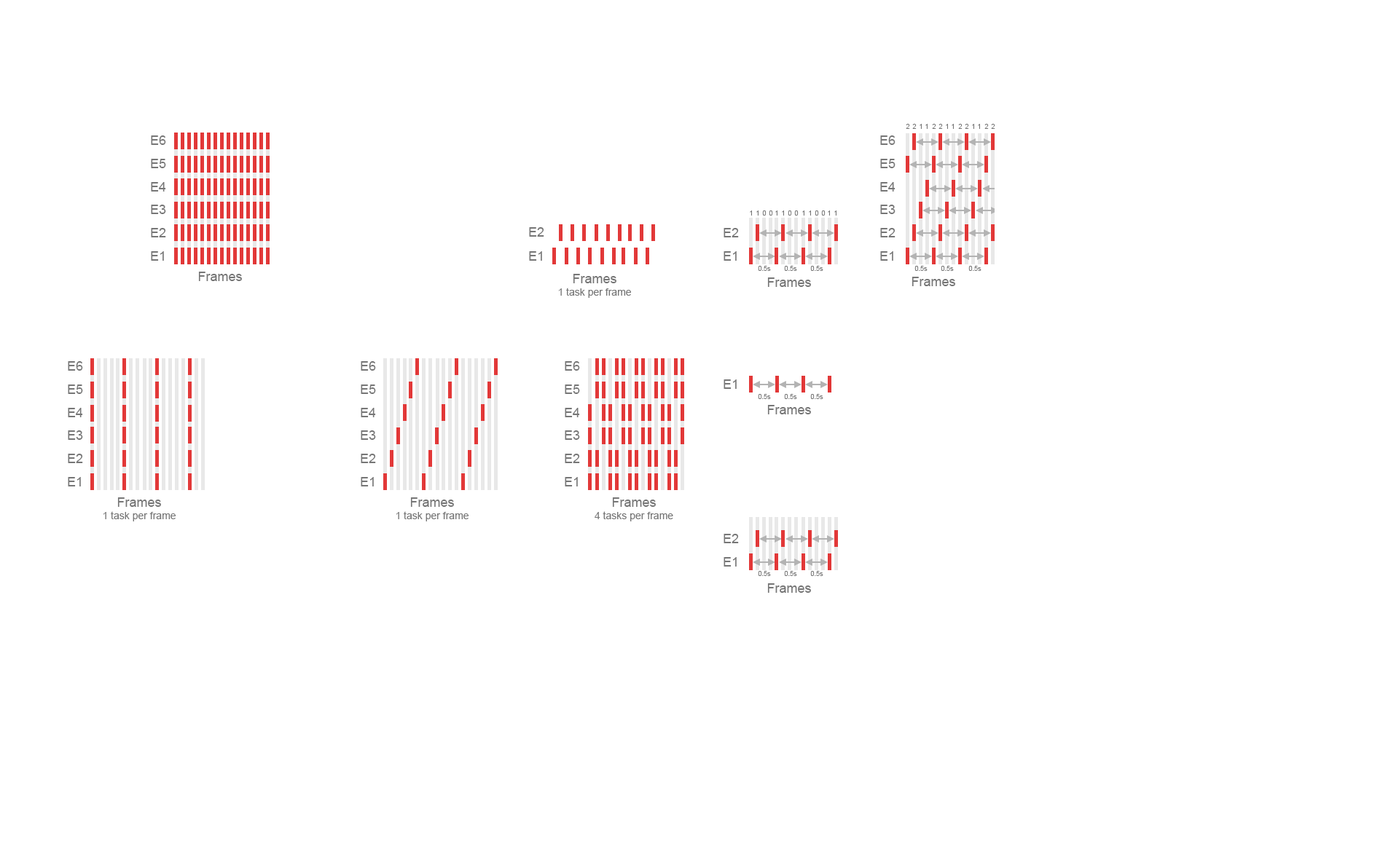
<style>
.page{position:relative;width:1399px;height:852px;background:#ffffff}
.page>*{position:absolute;margin:0}
.t1{font:6.6px "ArialMT";color:#767676}
.t2{font:13.1px "ArialMT";color:#767676}
.t3{font:10.2px "ArialMT";color:#767676}
</style>
<div class="page">
<p class="t1" style="left:906px;top:124px;width:4px;height:5px">2</p>
<p class="t1" style="left:912px;top:124px;width:5px;height:5px">2</p>
<p class="t1" style="left:919px;top:124px;width:3px;height:5px">1</p>
<p class="t1" style="left:925px;top:124px;width:2px;height:5px">1</p>
<p class="t1" style="left:932px;top:124px;width:4px;height:5px">2</p>
<p class="t1" style="left:938px;top:124px;width:5px;height:5px">2</p>
<p class="t1" style="left:946px;top:124px;width:2px;height:5px">1</p>
<p class="t1" style="left:952px;top:124px;width:2px;height:5px">1</p>
<p class="t1" style="left:958px;top:124px;width:4px;height:5px">2</p>
<p class="t1" style="left:965px;top:124px;width:4px;height:5px">2</p>
<p class="t1" style="left:972px;top:124px;width:2px;height:5px">1</p>
<p class="t1" style="left:978px;top:124px;width:2px;height:5px">1</p>
<p class="t1" style="left:984px;top:124px;width:5px;height:5px">2</p>
<p class="t1" style="left:991px;top:124px;width:4px;height:5px">2</p>
<p class="t2" style="left:151px;top:136px;width:15px;height:9px">E6</p>
<p class="t2" style="left:880px;top:136px;width:15px;height:9px">E6</p>
<p class="t2" style="left:151px;top:159px;width:15px;height:9px">E5</p>
<p class="t2" style="left:880px;top:159px;width:15px;height:9px">E5</p>
<p class="t2" style="left:151px;top:182px;width:15px;height:10px">E4</p>
<p class="t2" style="left:880px;top:182px;width:15px;height:10px">E4</p>
<p class="t2" style="left:151px;top:205px;width:15px;height:9px">E3</p>
<p class="t2" style="left:880px;top:205px;width:15px;height:9px">E3</p>
<p class="t1" style="left:750px;top:211px;width:2px;height:5px">1</p>
<p class="t1" style="left:756px;top:211px;width:2px;height:5px">1</p>
<p class="t1" style="left:762px;top:211px;width:4px;height:5px">0</p>
<p class="t1" style="left:769px;top:211px;width:4px;height:5px">0</p>
<p class="t1" style="left:775px;top:211px;width:2px;height:5px">1</p>
<p class="t1" style="left:782px;top:211px;width:2px;height:5px">1</p>
<p class="t1" style="left:788px;top:211px;width:4px;height:5px">0</p>
<p class="t1" style="left:794px;top:211px;width:5px;height:5px">0</p>
<p class="t1" style="left:802px;top:211px;width:2px;height:5px">1</p>
<p class="t1" style="left:809px;top:211px;width:2px;height:5px">1</p>
<p class="t1" style="left:815px;top:211px;width:4px;height:5px">0</p>
<p class="t1" style="left:821px;top:211px;width:4px;height:5px">0</p>
<p class="t1" style="left:828px;top:211px;width:2px;height:5px">1</p>
<p class="t1" style="left:834px;top:211px;width:2px;height:5px">1</p>
<p class="t2" style="left:151px;top:228px;width:15px;height:10px">E2</p>
<p class="t2" style="left:529px;top:227px;width:15px;height:10px">E2</p>
<p class="t2" style="left:723px;top:228px;width:16px;height:10px">E2</p>
<p class="t2" style="left:880px;top:228px;width:15px;height:10px">E2</p>
<p class="t2" style="left:151px;top:251px;width:13px;height:10px">E1</p>
<p class="t2" style="left:529px;top:251px;width:13px;height:10px">E1</p>
<p class="t2" style="left:723px;top:251px;width:14px;height:10px">E1</p>
<p class="t2" style="left:880px;top:251px;width:13px;height:10px">E1</p>
<p class="t1" style="left:758px;top:266px;width:13px;height:5px">0.5s</p>
<p class="t1" style="left:784px;top:266px;width:13px;height:5px">0.5s</p>
<p class="t1" style="left:810px;top:266px;width:13px;height:5px">0.5s</p>
<p class="t1" style="left:914px;top:266px;width:13px;height:5px">0.5s</p>
<p class="t1" style="left:941px;top:266px;width:13px;height:5px">0.5s</p>
<p class="t1" style="left:968px;top:266px;width:13px;height:5px">0.5s</p>
<p class="t2" style="left:198px;top:272px;width:44px;height:9px">Frames</p>
<p class="t3" style="left:558px;top:274px;width:73px;height:24px;text-align:center"><span class="t2">Frames<br></span>1 task per frame</p>
<p class="t2" style="left:767px;top:278px;width:44px;height:9px">Frames</p>
<p class="t2" style="left:911px;top:277px;width:44px;height:9px">Frames</p>
<p class="t2" style="left:68px;top:361px;width:15px;height:10px">E6</p>
<p class="t2" style="left:361px;top:361px;width:15px;height:10px">E6</p>
<p class="t2" style="left:565px;top:361px;width:15px;height:10px">E6</p>
<p class="t2" style="left:68px;top:385px;width:15px;height:9px">E5</p>
<p class="t2" style="left:361px;top:385px;width:15px;height:9px">E5</p>
<p class="t2" style="left:565px;top:385px;width:15px;height:9px">E5</p>
<p class="t2" style="left:723px;top:380px;width:14px;height:9px">E1</p>
<p class="t1" style="left:758px;top:394px;width:13px;height:5px">0.5s</p>
<p class="t1" style="left:784px;top:394px;width:13px;height:5px">0.5s</p>
<p class="t1" style="left:810px;top:394px;width:13px;height:5px">0.5s</p>
<p class="t2" style="left:68px;top:408px;width:15px;height:9px">E4</p>
<p class="t2" style="left:361px;top:408px;width:15px;height:9px">E4</p>
<p class="t2" style="left:565px;top:408px;width:15px;height:9px">E4</p>
<p class="t2" style="left:767px;top:405px;width:44px;height:10px">Frames</p>
<p class="t2" style="left:68px;top:431px;width:15px;height:9px">E3</p>
<p class="t2" style="left:361px;top:431px;width:15px;height:9px">E3</p>
<p class="t2" style="left:565px;top:431px;width:15px;height:9px">E3</p>
<p class="t2" style="left:68px;top:454px;width:15px;height:9px">E2</p>
<p class="t2" style="left:361px;top:454px;width:15px;height:9px">E2</p>
<p class="t2" style="left:565px;top:454px;width:15px;height:9px">E2</p>
<p class="t2" style="left:68px;top:477px;width:13px;height:10px">E1</p>
<p class="t2" style="left:361px;top:477px;width:13px;height:10px">E1</p>
<p class="t2" style="left:565px;top:477px;width:13px;height:10px">E1</p>
<p class="t3" style="left:103px;top:498px;width:73px;height:24px;text-align:center"><span class="t2">Frames<br></span>1 task per frame</p>
<p class="t3" style="left:396px;top:498px;width:72px;height:24px;text-align:center"><span class="t2">Frames<br></span>1 task per frame</p>
<p class="t3" style="left:595px;top:498px;width:78px;height:24px;text-align:center"><span class="t2">Frames<br></span>4 tasks per frame</p>
<p class="t2" style="left:723px;top:534px;width:16px;height:10px">E2</p>
<p class="t2" style="left:723px;top:557px;width:14px;height:10px">E1</p>
<p class="t1" style="left:758px;top:571px;width:13px;height:5px">0.5s</p>
<p class="t1" style="left:784px;top:571px;width:13px;height:5px">0.5s</p>
<p class="t1" style="left:810px;top:571px;width:13px;height:5px">0.5s</p>
<p class="t2" style="left:767px;top:584px;width:44px;height:9px">Frames</p>
</div>
